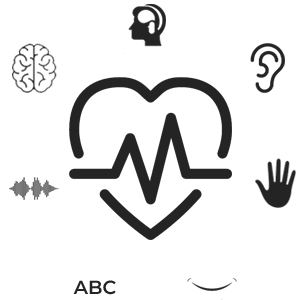
<style>
.page{position:relative;width:300px;height:300px;background:#ffffff}
.page>*{position:absolute;margin:0}
.t1{font:19px "Montserrat-SemiBold";color:#242424}
</style>
<div class="page">
<p class="t1" style="left:73px;top:280px;width:43px;height:15px">ABC</p>
</div>
